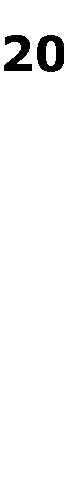
<style>
.page{position:relative;width:64px;height:500px;background:#ffffff}
.page>*{position:absolute;margin:0}
.t1{font:48px "Verdana-Bold";color:#000000}
</style>
<div class="page">
<p class="t1" style="left:4px;top:35px;width:61px;height:37px">20</p>
</div>
